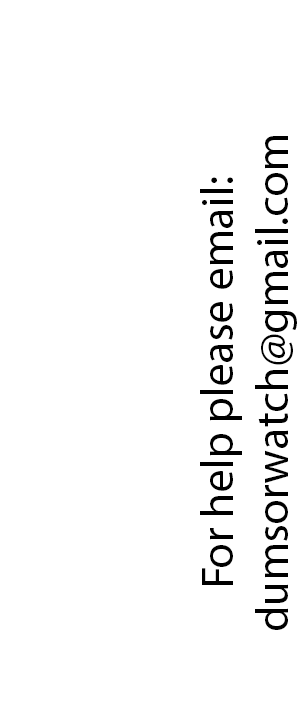
<style>
.page{position:relative;width:300px;height:720px;background:#ffffff}
.page>*{position:absolute;margin:0}
.t1{font:45.8px "MyriadPro-Regular";color:#000000}
</style>
<div class="page">
<p class="t1" style="left:200px;top:136px;width:97px;height:494px;text-align:center;rotate:-90deg">For help please email:<br>dumsorwatch@gmail.com</p>
</div>
